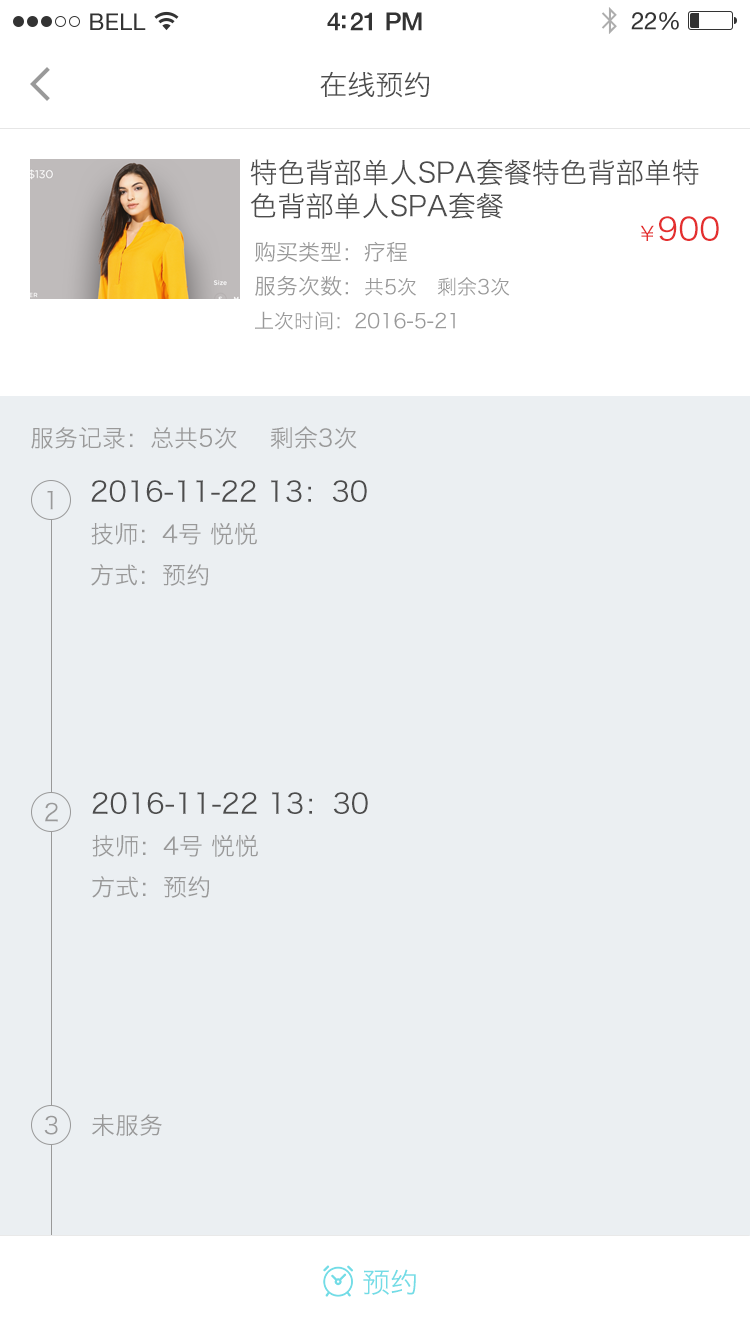
<style>
.page{position:relative;width:750px;height:1334px;background:#ebeff2}
.page>*{position:absolute;margin:0}
.t1{font:28px "HiraginoSansGB-W3";color:#4d4d4d}
.t2{font:32px "HiraginoSansGB-W3";color:#e42f2f}
.t3{font:20px "HiraginoSansGB-W3";color:#999999}
.t4{font:20px "HiraginoSansGB-W3";color:#e42f2f}
.t5{font:20px/34px "HiraginoSansGB-W3";color:#999999}
.t6{font:22px/34px "HiraginoSansGB-W3";color:#999999}
.t7{font:24px "HiraginoSansGB-W3";color:#999999}
.t8{font:28px/41px "HiraginoSansGB-W3";color:#4d4d4d}
.t9{font:24px/41px "HiraginoSansGB-W3";color:#999999}
.t10{font:28px "HiraginoSansGB-W3";color:#73dce6}
</style>
<div class="page">
<p class="t1" style="left:320px;top:71px;width:109px;height:27px">在线预约</p>
<p class="t1" style="left:250px;top:159px;width:449px;height:60px;text-align:justify">特色背部单人SPA套餐特色背部单特<br>色背部单人SPA套餐</p>
<p class="t2" style="left:640px;top:216px;width:79px;height:25px"><span class="t3">                                        </span><span class="t4">￥</span>900</p>
<p class="t5" style="left:254px;top:241px;width:256px;height:89px;text-align:justify"><span class="t6">购买类型：疗程<br>服务次数：</span>共5次   剩余3次<br>上次时间：2016-5-21</p>
<p class="t7" style="left:31px;top:426px;width:326px;height:23px">服务记录：总共5次    剩余3次</p>
<p class="t8" style="left:91px;top:480px;width:276px;height:106px;text-align:justify">2016-11-22 13：30<br><span class="t9">技师：4号 悦悦<br>方式：预约</span></p>
<p class="t7" style="left:47px;top:491px;width:6px;height:19px">1</p>
<p class="t8" style="left:92px;top:792px;width:276px;height:106px;text-align:justify">2016-11-22 13：30<br><span class="t9">技师：4号 悦悦<br>方式：预约</span></p>
<p class="t7" style="left:45px;top:802px;width:13px;height:20px">2</p>
<p class="t7" style="left:44px;top:1115px;width:14px;height:20px">3</p>
<p class="t7" style="left:92px;top:1114px;width:70px;height:22px">未服务</p>
<p class="t10" style="left:363px;top:1269px;width:53px;height:26px">预约</p>
</div>
